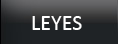
<style>
.page{position:relative;width:118px;height:44px;background:#1f2326}
.page>*{position:absolute;margin:0}
.t1{font:22px "Calibri";color:#ffffff}
</style>
<div class="page">
<p class="t1" style="left:32px;top:16px;width:50px;height:14px">LEYES</p>
</div>
